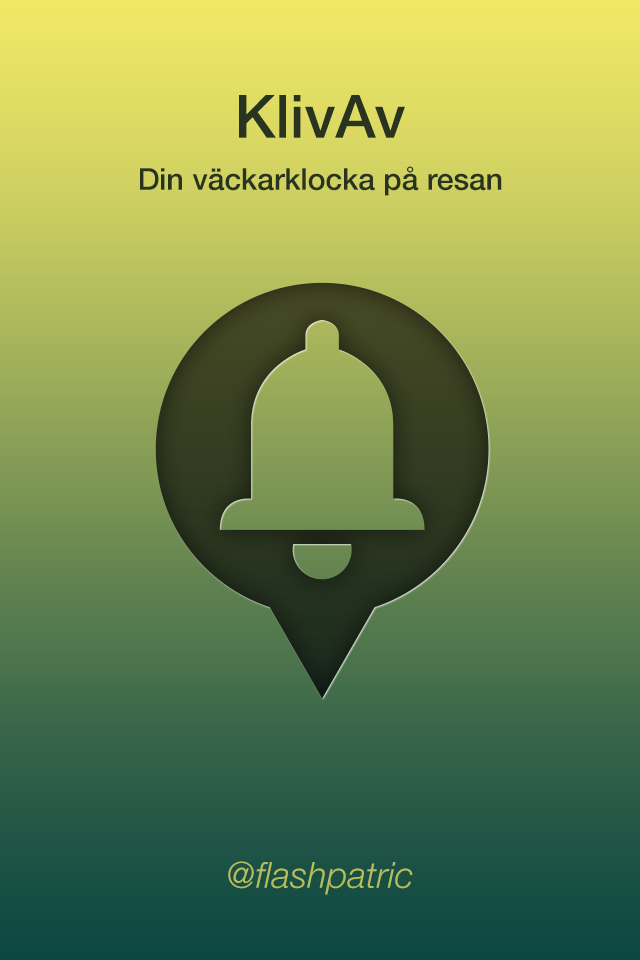
<style>
.page{position:relative;width:640px;height:960px}
.page>*{position:absolute;margin:0}
.t1{font:30px "HelveticaNeue-Medium";color:#28341f}
.t2{font:60px "HelveticaNeue-Medium";color:#28341f}
.t3{font:36px "HelveticaNeue-LightItalic";color:#b5be5d}
</style>
<div class="page">
<p class="t1" style="left:140px;top:95px;width:362px;height:101px;text-align:center"><span class="t2">KlivAv<br></span>Din väckarklocka på resan</p>
<p class="t3" style="left:228px;top:861px;width:185px;height:34px">@flashpatric</p>
</div>
